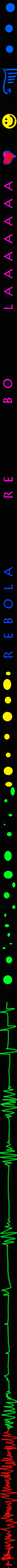
<style>
.page{position:relative;width:17px;height:1568px;background:#030303}
.page>*{position:absolute;margin:0}
.t1{font:12.5px "LithosPro-Regular";color:#fa06d5}
.t2{font:12.5px "LithosPro-Regular";color:#0645fa}
</style>
<div class="page">
<p class="t1" style="left:3px;top:379px;width:9px;height:24px;rotate:-90deg">B  O</p>
<p class="t1" style="left:4px;top:477px;width:9px;height:21px;rotate:-90deg">R  E</p>
<p class="t2" style="left:3px;top:567px;width:10px;height:91px;rotate:-90deg">R   E  B  O  L  A</p>
</div>
